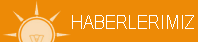
<style>
.page{position:relative;width:198px;height:42px;background:#ed8a06}
.page>*{position:absolute;margin:0}
.t1{font:20px "ArialNarrow";color:#ffffff}
</style>
<div class="page">
<p class="t1" style="left:72px;top:15px;width:122px;height:14px">HABERLERIMIZ</p>
</div>
